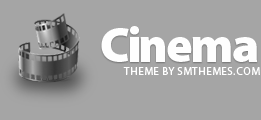
<style>
.page{position:relative;width:261px;height:120px;background:#a5a5a5}
.page>*{position:absolute;margin:0}
.t1{font:50px "MyriadPro-Black";letter-spacing:-0.075em;color:#fefefe}
.t2{font:11px "MyriadPro-Regular";letter-spacing:0.025em;color:#ffffff;text-transform:uppercase}
</style>
<div class="page">
<p class="t1" style="left:101px;top:26px;width:157px;height:36px">Cinema</p>
<p class="t2" style="left:123px;top:67px;width:137px;height:8px">Theme by SMThemes.com</p>
</div>
